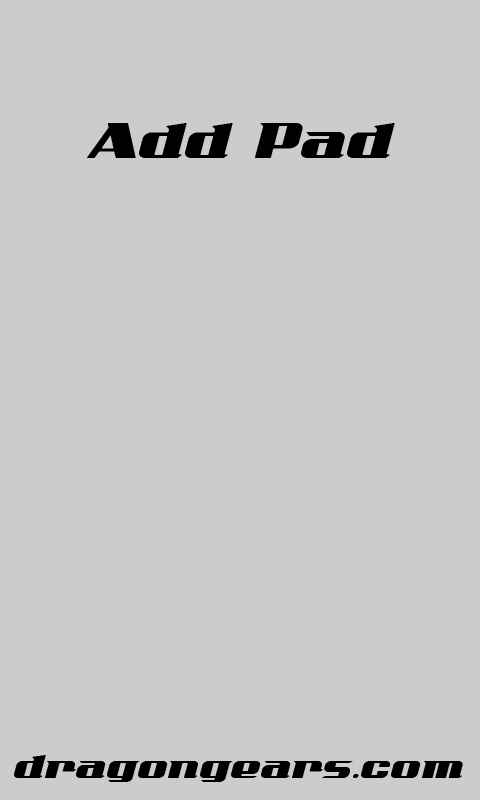
<style>
.page{position:relative;width:480px;height:800px;background:#cccccc}
.page>*{position:absolute;margin:0}
.t1{font:72px "AddCityboyNormal";color:#000000}
.t2{font:48px "AddCityboyNormal";color:#000000}
</style>
<div class="page">
<p class="t1" style="left:87px;top:123px;width:308px;height:35px">Add Pad</p>
<p class="t2" style="left:14px;top:755px;width:449px;height:27px">dragongears.com</p>
</div>
